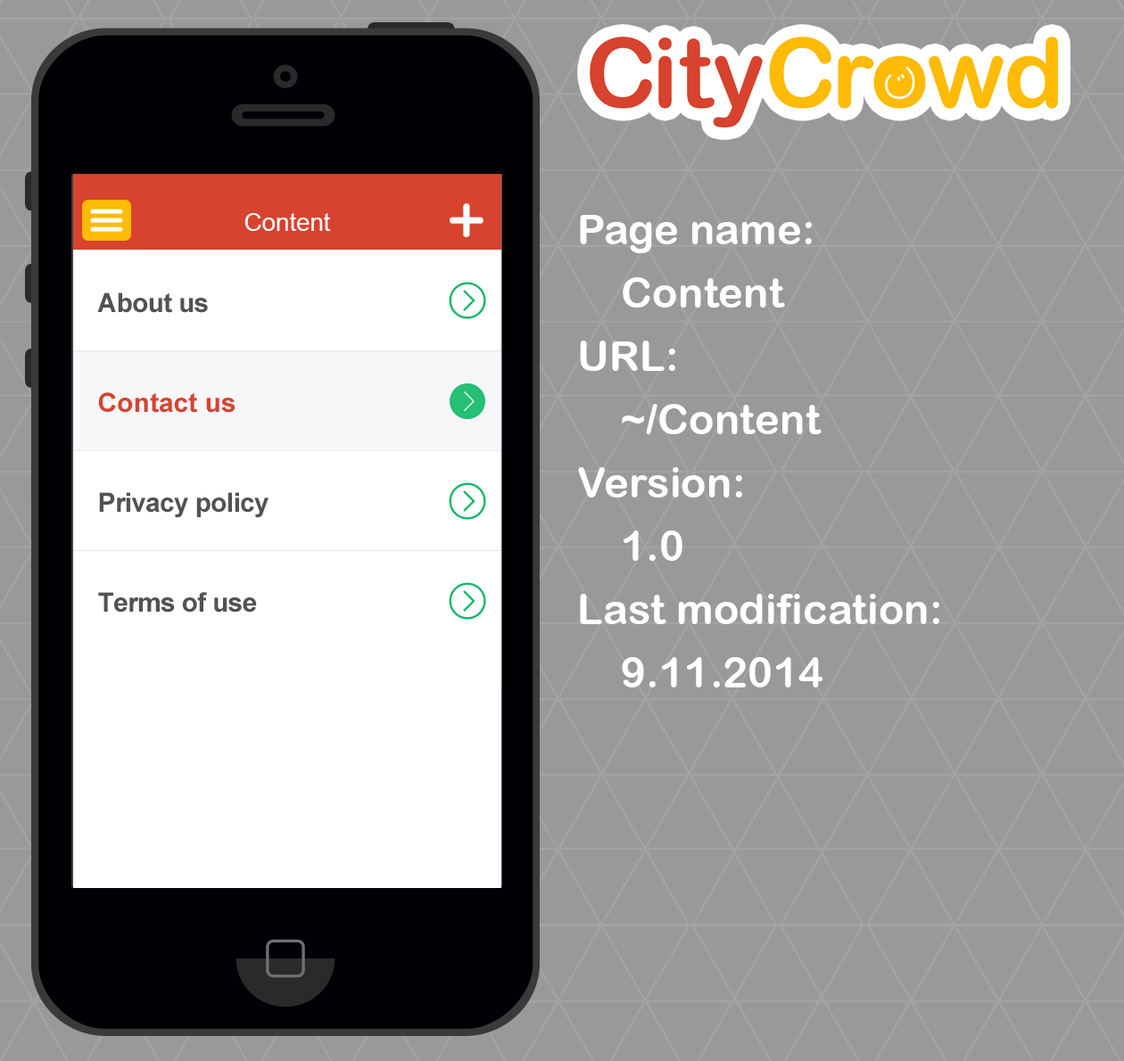
<style>
.page{position:relative;width:1124px;height:1061px;background:#999999}
.page>*{position:absolute;margin:0}
.t1{font:24.6px "ArialMT";color:#ffffff}
.t2{font:42.2px/63.3px "ArialRoundedMTBold";color:#ffffff}
.t3{font:26.8px/99.9px "Arial-BoldMT";letter-spacing:-0.025em;color:#525252}
.t4{font:26.8px/99.9px "Arial-BoldMT";color:#d7432e}
</style>
<div class="page">
<p class="t1" style="left:244px;top:213px;width:86px;height:18px">Content</p>
<p class="t2" style="left:578px;top:215px;width:361px;height:473px">Page name:<br>Content<br>URL:<br>~/Content<br>Version:<br>1.0<br>Last modification:<br>9.11.2014</p>
<p class="t3" style="left:97px;top:293px;width:171px;height:320px">About us<br><span class="t4">Contact us<br></span>Privacy policy<br>Terms of use</p>
</div>
